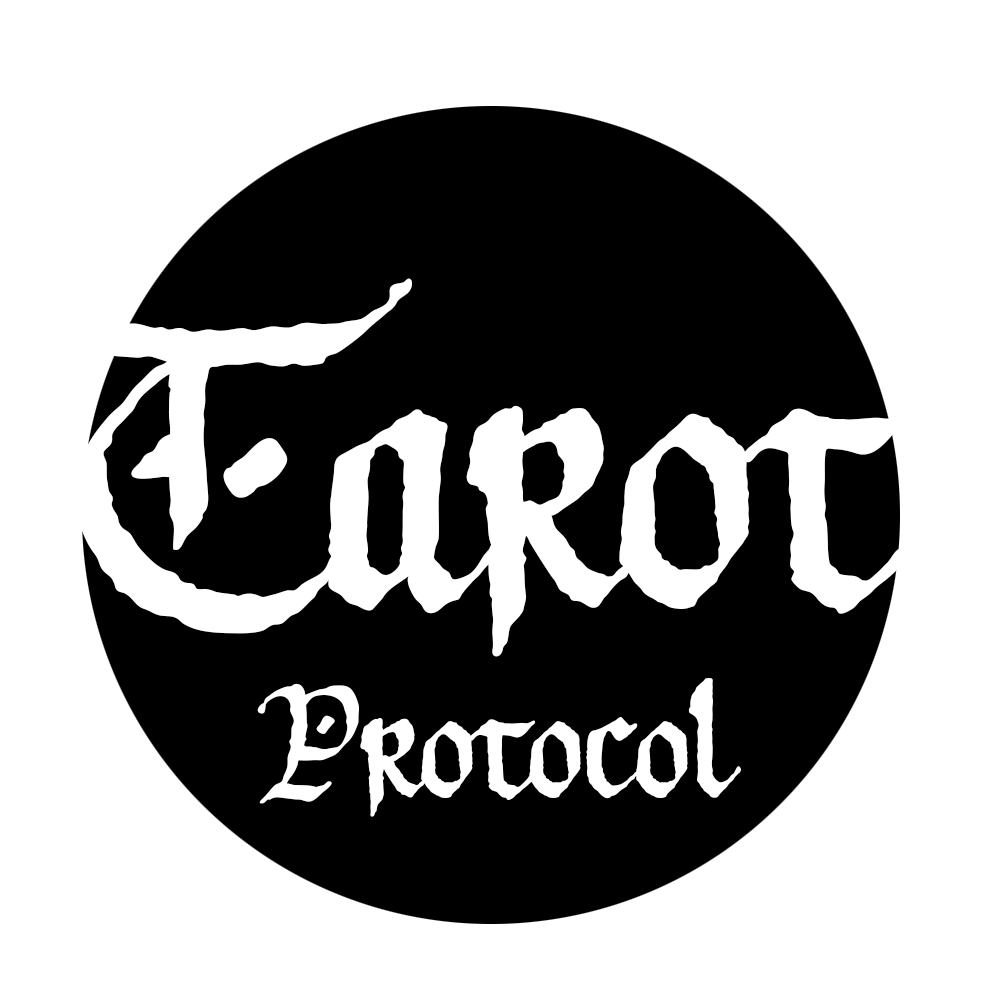
<style>
.page{position:relative;width:1000px;height:1000px;background:#ffffff}
.page>*{position:absolute;margin:0}
.t1{font:508.3px "LongbowBB";color:#ffffff}
.t2{font:200px "LongbowBB";color:#ffffff}
</style>
<div class="page">
<p class="t1" style="left:15px;top:278px;width:896px;height:379px">Tarot</p>
<p class="t2" style="left:257px;top:678px;width:484px;height:139px">Protocol</p>
</div>
